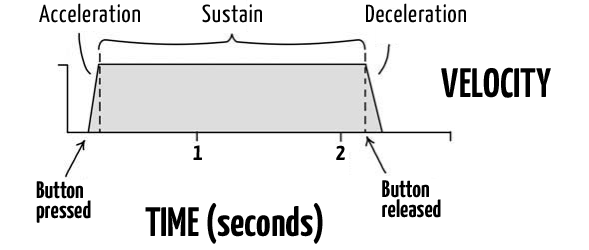
<style>
.page{position:relative;width:589px;height:250px;background:#ffffff}
.page>*{position:absolute;margin:0}
.t1{font:41px "YanoneKaffeesatz-Bold";color:#000000}
.t2{font:24px "YanoneKaffeesatz-Bold";color:#000000}
.t3{font:24px/20px "YanoneKaffeesatz-Bold";color:#000000}
</style>
<div class="page">
<p class="t1" style="left:441px;top:67px;width:110px;height:31px">VELOCITY</p>
<p class="t2" style="left:193px;top:145px;width:9px;height:15px">1</p>
<p class="t2" style="left:336px;top:145px;width:9px;height:15px">2</p>
<p class="t3" style="left:36px;top:181px;width:55px;height:42px">Button<br>pressed</p>
<p class="t3" style="left:382px;top:180px;width:59px;height:38px">Button<br>released</p>
<p class="t1" style="left:145px;top:203px;width:178px;height:41px">TIME (seconds)</p>
</div>
